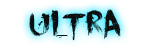
<style>
.page{position:relative;width:150px;height:50px;background:#ffffff}
.page>*{position:absolute;margin:0}
.t1{font:36px "FaceYourFears";color:#0e0e0e}
</style>
<div class="page">
<p class="t1" style="left:29px;top:9px;width:92px;height:32px">Ultra</p>
</div>
